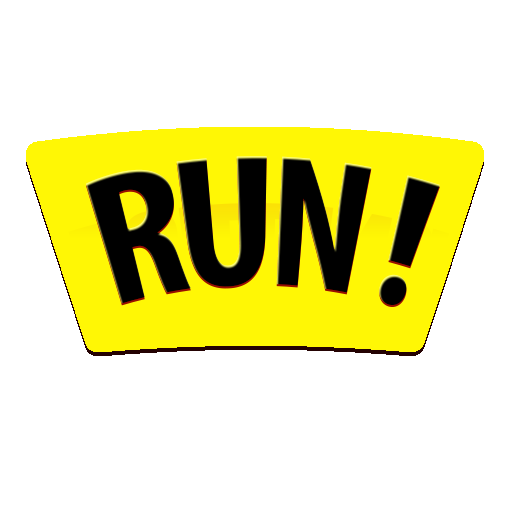
<style>
.page{position:relative;width:512px;height:512px;background:#ffffff}
.page>*{position:absolute;margin:0}
.t1{font:190.6px "MyriadPro-BoldCond";letter-spacing:-0.05em;color:#000000;text-transform:uppercase;scale:0.84 1}
</style>
<div class="page">
<p class="t1" style="left:86px;top:156px;width:354px;height:149px">RUN !</p>
</div>
